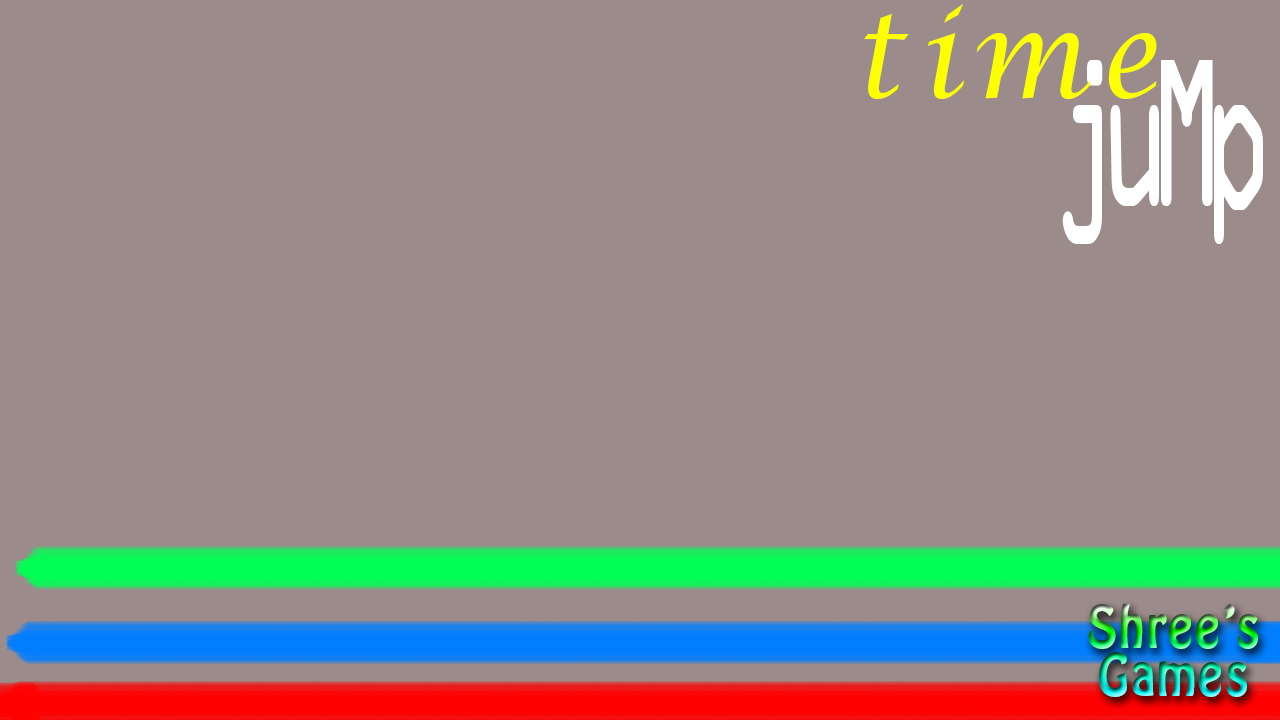
<style>
.page{position:relative;width:1280px;height:720px;background:#9c8b8b}
.page>*{position:absolute;margin:0}
.t1{font:120.3px "LucidaCalligraphy-Italic";letter-spacing:0.12em;color:#fcff00;scale:0.92 1}
.t2{font:188px "OCRAStd";letter-spacing:-0.22em;color:#ffffff;scale:0.56 1}
.t3{font:51.7px/48px "HoboStd";letter-spacing:0.04em;scale:0.9 1}
</style>
<div class="page">
<p class="t1" style="left:864px;top:4px;width:293px;height:95px">time</p>
<p class="t2" style="left:1062px;top:60px;width:201px;height:184px">juMp</p>
<p class="t3" style="left:1088px;top:603px;width:170px;height:94px;text-align:center">Shree’s<br>Games</p>
</div>
